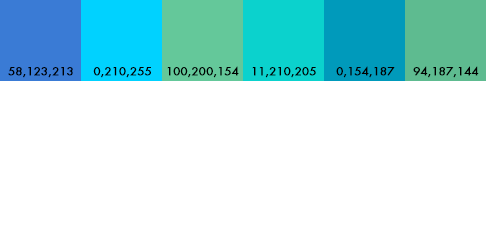
<style>
.page{position:relative;width:486px;height:244px;background:#ffffff}
.page>*{position:absolute;margin:0}
.t1{font:10.9px "FuturaStd-Book";color:#000000;font-weight:bold;scale:1.04 1}
</style>
<div class="page">
<p class="t1" style="left:8px;top:67px;width:65px;height:11px">58,123,213</p>
<p class="t1" style="left:93px;top:67px;width:58px;height:11px">0,210,255</p>
<p class="t1" style="left:167px;top:66px;width:72px;height:12px">100,200,154</p>
<p class="t1" style="left:252px;top:67px;width:64px;height:11px">11,210,205</p>
<p class="t1" style="left:336px;top:66px;width:59px;height:12px">0,154,187</p>
<p class="t1" style="left:413px;top:66px;width:66px;height:12px">94,187,144</p>
</div>
